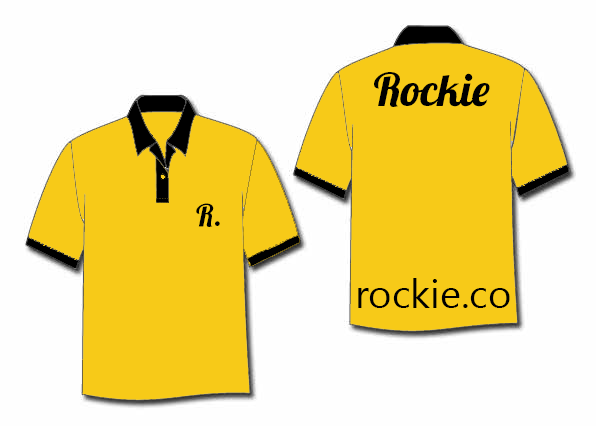
<style>
.page{position:relative;width:596px;height:426px;background:#fefefe}
.page>*{position:absolute;margin:0}
.t1{font:45px "Lobster1.4";color:#000000}
.t2{font:30px "Lobster1.4";color:#000000}
.t3{font:40px "SegoeUI";color:#000000}
</style>
<div class="page">
<p class="t1" style="left:374px;top:72px;width:116px;height:35px">Rockie</p>
<p class="t2" style="left:196px;top:203px;width:24px;height:24px">R.</p>
<p class="t3" style="left:358px;top:278px;width:152px;height:30px">rockie.co</p>
</div>
